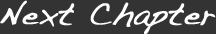
<style>
.page{position:relative;width:216px;height:34px;background:#333333}
.page>*{position:absolute;margin:0}
.t1{font:32px "Handwriting-Dakota";color:#ffffff;font-weight:bold}
</style>
<div class="page">
<p class="t1" style="left:0px;top:0px;width:216px;height:34px">Next Chapter</p>
</div>
